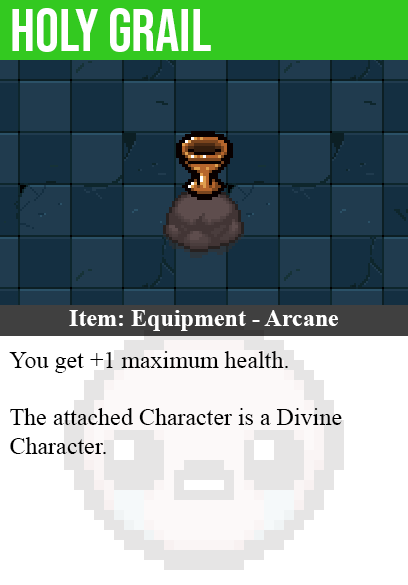
<style>
.page{position:relative;width:408px;height:585px;background:#ffffff}
.page>*{position:absolute;margin:0}
.t1{font:60px "BebasNeue-Regular";color:#ffffff}
.t2{font:24px "TimesNewRomanPS-BoldMT";color:#ffffff}
.t3{font:24px "TimesNewRomanPSMT";color:#000000}
</style>
<div class="page">
<p class="t1" style="left:12px;top:8px;width:199px;height:44px">holy grail</p>
<p class="t2" style="left:69px;top:310px;width:269px;height:21px">Item: Equipment - Arcane</p>
<p class="t3" style="left:9px;top:351px;width:333px;height:103px">You get +1 maximum health.<br><br>The attached Character is a Divine<br>Character.</p>
</div>
